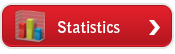
<style>
.page{position:relative;width:175px;height:54px}
.page>*{position:absolute;margin:0}
.t1{font:16px "BellGothicStd-Bold";color:#ffffff}
</style>
<div class="page">
<p class="t1" style="left:58px;top:21px;width:62px;height:12px">Statistics</p>
</div>
